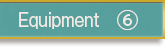
<style>
.page{position:relative;width:165px;height:47px;background:#569f9c}
.page>*{position:absolute;margin:0}
.t1{font:18px "GothicMB101Pro-Regular";letter-spacing:-0.04em;color:#f2ebe5;scale:0.9 1}
</style>
<div class="page">
<p class="t1" style="left:19px;top:12px;width:80px;height:17px">Equipment</p>
</div>
